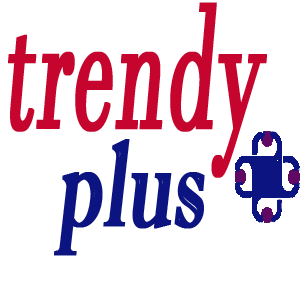
<style>
.page{position:relative;width:300px;height:300px;background:#ffffff}
.page>*{position:absolute;margin:0}
.t1{font:175.2px "JavaneseText";color:#c5052d;font-weight:bold;font-style:italic;scale:0.49 1}
.t2{font:121.9px "ImprintMT-Shadow";color:#0c1481;font-weight:bold;font-style:italic;scale:0.64 1}
</style>
<div class="page">
<p class="t1" style="left:8px;top:2px;width:259px;height:176px">trendy</p>
<p class="t2" style="left:54px;top:139px;width:151px;height:117px">plus</p>
</div>
